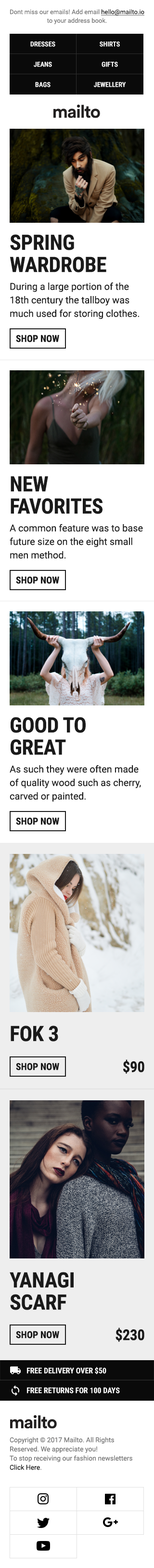
<style>
.page{position:relative;width:154px;height:1568px;background:#ffffff}
.page>*{position:absolute;margin:0}
.t1{font:6.3px/8.7px "Roboto-Regular";color:#767676}
.t2{font:6.3px/8.7px "Roboto-Regular";color:#1a1a1a;text-decoration:underline}
.t3{font:6.8px "RobotoCondensed-Bold";color:#ffffff;text-transform:uppercase}
.t4{font:21.2px/22.2px "RobotoCondensed-Bold";letter-spacing:-0.01em;color:#1a1a1a;text-transform:uppercase}
.t5{font:9.6px/13.5px "Roboto-Regular";color:#1a1a1a}
.t6{font:9.6px "RobotoCondensed-Bold";color:#1a1a1a;text-transform:uppercase}
.t7{font:21.2px "RobotoCondensed-Bold";letter-spacing:-0.01em;color:#1a1a1a;text-transform:uppercase}
.t8{font:14.9px "RobotoCondensed-Bold";letter-spacing:-0.01em;color:#1a1a1a;text-transform:uppercase}
.t9{font:7.7px "RobotoCondensed-Bold";color:#ffffff;text-transform:uppercase}
.t10{font:6.8px/9.2px "Roboto-Regular";color:#767676}
.t11{font:6.8px/9.2px "Roboto-Regular";color:#1a1a1a}
</style>
<div class="page">
<p class="t1" style="left:10px;top:9px;width:135px;height:15px;text-align:center">Dont miss our emails! Add email <span class="t2">hello@mailto.io </span>to your address book.</p>
<p class="t3" style="left:30px;top:41px;width:25px;height:6px">Dresses</p>
<p class="t3" style="left:100px;top:41px;width:20px;height:6px">Shirts</p>
<p class="t3" style="left:34px;top:62px;width:18px;height:5px">Jeans</p>
<p class="t3" style="left:102px;top:62px;width:16px;height:5px">Gifts</p>
<p class="t3" style="left:35px;top:82px;width:16px;height:5px">Bags</p>
<p class="t3" style="left:94px;top:82px;width:32px;height:5px">Jewellery</p>
<p class="t4" style="left:10px;top:234px;width:97px;height:38px">SPRING WARDROBE</p>
<p class="t5" style="left:10px;top:282px;width:129px;height:37px">During a large portion of the 18th century the tallboy was much used for storing clothes.</p>
<p class="t6" style="left:16px;top:335px;width:43px;height:7px">Shop Now</p>
<p class="t4" style="left:11px;top:476px;width:92px;height:38px">New Favorites</p>
<p class="t5" style="left:10px;top:524px;width:133px;height:35px">A common feature was to base future size on the eight small men method.</p>
<p class="t6" style="left:16px;top:576px;width:43px;height:8px">Shop Now</p>
<p class="t4" style="left:11px;top:717px;width:75px;height:38px">Good to Great</p>
<p class="t5" style="left:10px;top:765px;width:131px;height:37px">As such they were often made of quality wood such as cherry, carved or painted.</p>
<p class="t6" style="left:16px;top:817px;width:43px;height:8px">Shop Now</p>
<p class="t7" style="left:11px;top:1026px;width:47px;height:15px">FOK 3</p>
<p class="t8" style="left:123px;top:1059px;width:22px;height:15px">$90</p>
<p class="t6" style="left:16px;top:1063px;width:43px;height:7px">Shop Now</p>
<p class="t4" style="left:10px;top:1272px;width:64px;height:38px">YANAGI<br>SCARF</p>
<p class="t6" style="left:16px;top:1331px;width:43px;height:7px">Shop Now</p>
<p class="t8" style="left:116px;top:1327px;width:29px;height:15px">$230</p>
<p class="t9" style="left:27px;top:1367px;width:80px;height:7px">FREE DELIVERY OVER $50</p>
<p class="t9" style="left:27px;top:1387px;width:93px;height:6px">FREE RETURNS FOR 100 DAYS</p>
<p class="t10" style="left:10px;top:1437px;width:123px;height:33px">Copyright © 2017 Mailto. All Rights Reserved. We appreciate you!<br>To stop receiving our fashion newsletters <span class="t11">Click Here</span>.</p>
</div>
